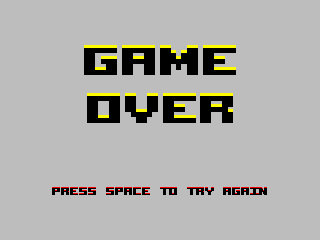
<style>
.page{position:relative;width:320px;height:240px;background:#bdbdbd}
.page>*{position:absolute;margin:0}
.t1{font:72px/48px "AcknowledgeTT-BRK-";color:#000000}
.t2{font:72px/48px "AcknowledgeTT-BRK-";color:#010100}
.t3{font:18px "AcknowledgeTT-BRK-"}
.t4{font:18px "AcknowledgeTT-BRK-";color:#000000}
</style>
<div class="page">
<p class="t1" style="left:84px;top:45px;width:152px;height:75px;text-align:center">GAME<br>OVER</p>
<p class="t2" style="left:84px;top:48px;width:152px;height:75px;text-align:center">GAME<br>OVER</p>
<p class="t3" style="left:52px;top:187px;width:215px;height:7px">PRESS SPACE TO TRY AGAIN</p>
<p class="t4" style="left:52px;top:188px;width:215px;height:7px">PRESS SPACE TO TRY AGAIN</p>
</div>
